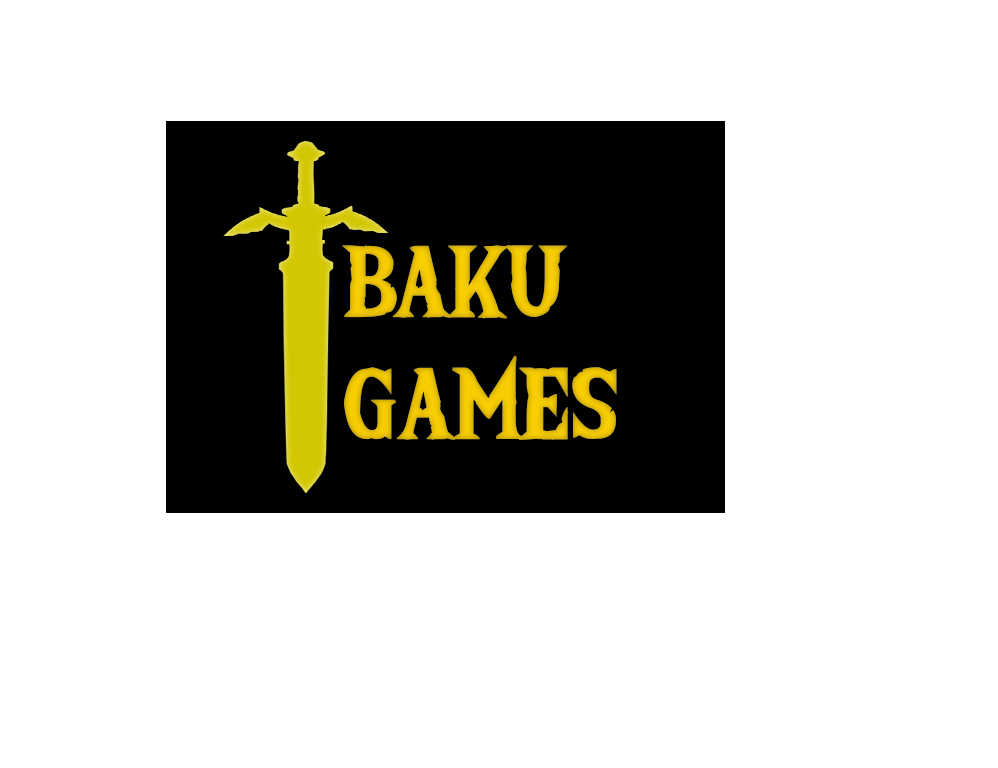
<style>
.page{position:relative;width:998px;height:768px;background:#ffffff}
.page>*{position:absolute;margin:0}
.t1{font:102px "TheWildBreathofZelda";color:#f8cd02}
</style>
<div class="page">
<p class="t1" style="left:342px;top:245px;width:275px;height:195px">BAKU<br>GAMES</p>
</div>
